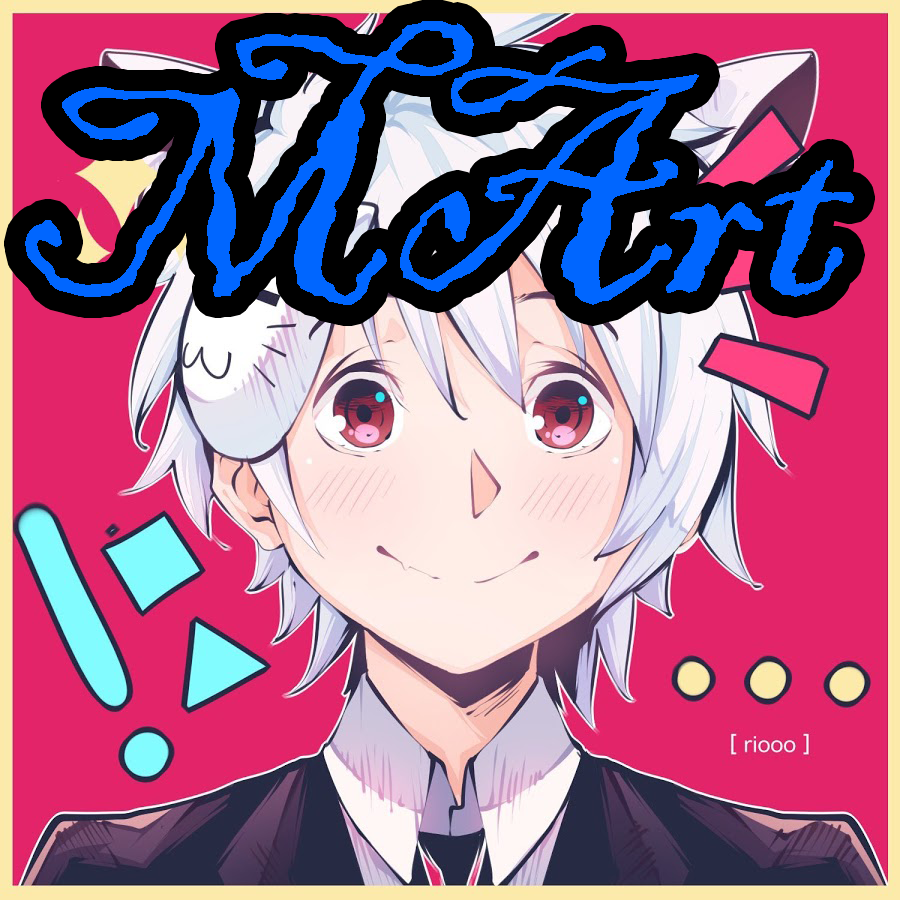
<style>
.page{position:relative;width:900px;height:900px}
.page>*{position:absolute;margin:0}
.t1{font:320px "BlackadderITC-Regular";color:#0066ff}
</style>
<div class="page">
<p class="t1" style="left:25px;top:21px;width:829px;height:284px">MArt</p>
</div>
